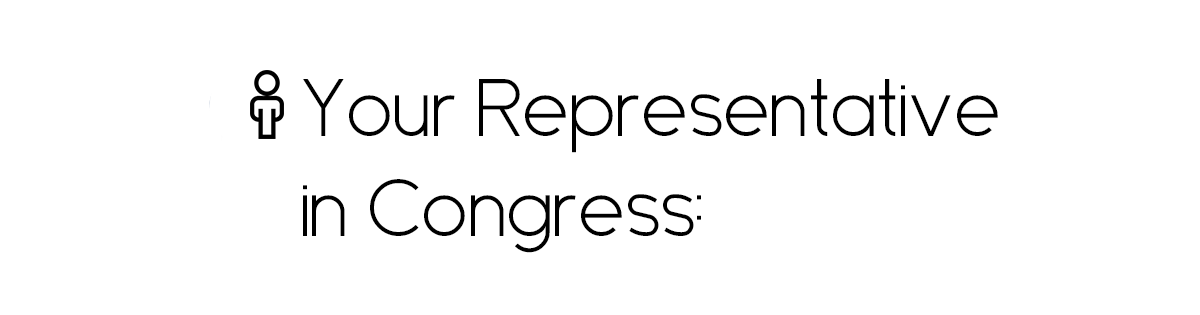
<style>
.page{position:relative;width:1200px;height:315px;background:#ffffff}
.page>*{position:absolute;margin:0}
.t1{font:83.3px "Sanseriffic";color:#000000}
</style>
<div class="page">
<p class="t1" style="left:303px;top:79px;width:695px;height:174px">Your Representative <br>in Congress:</p>
</div>
